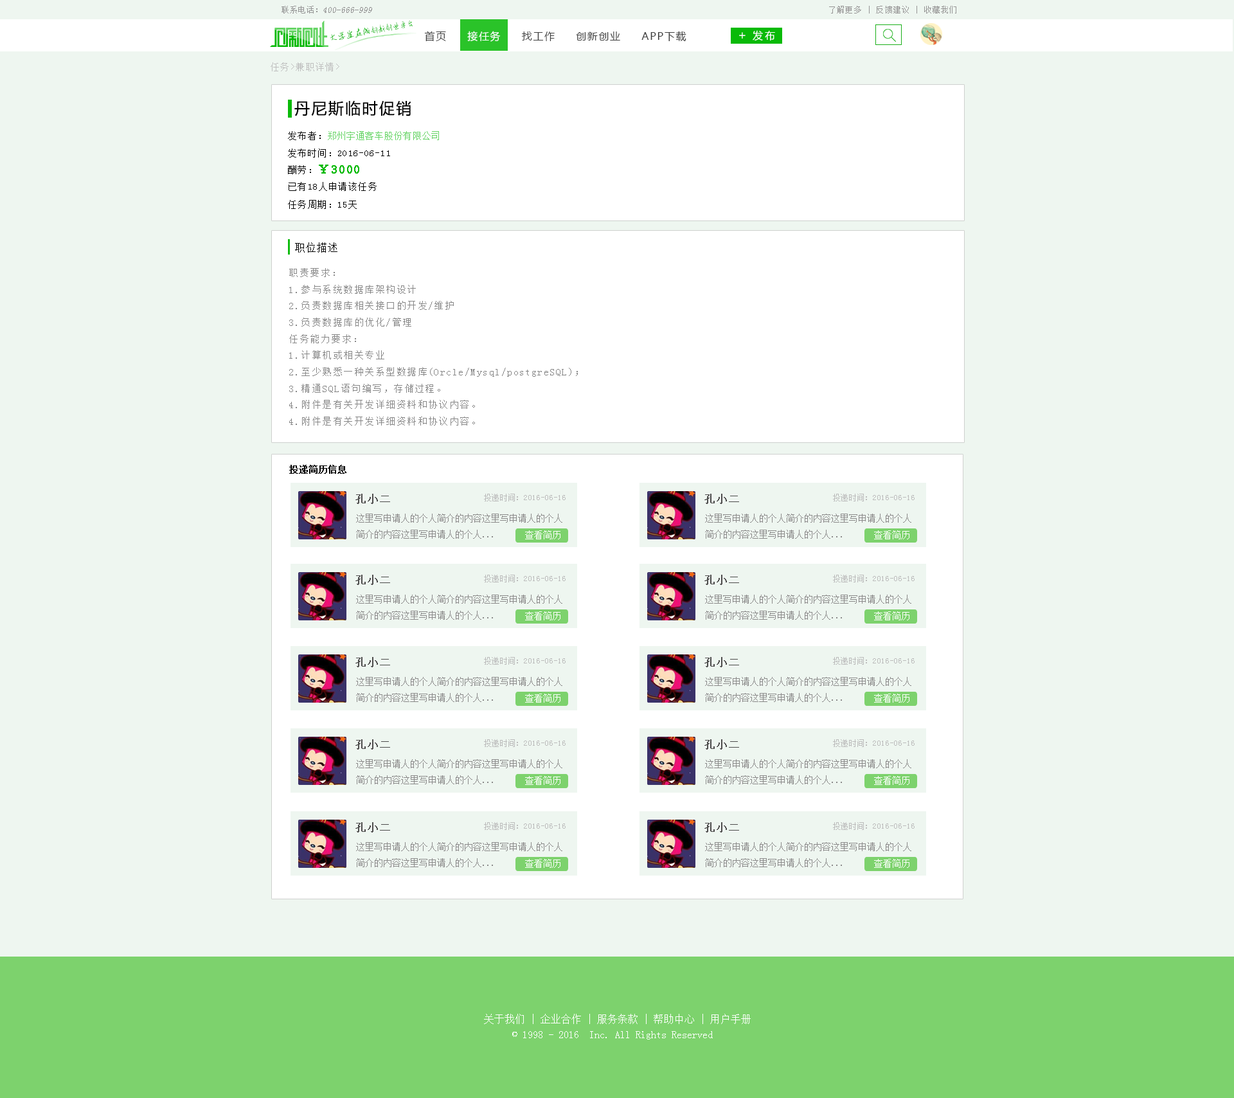
<style>
.page{position:relative;width:1234px;height:1098px;background:#eef6f0}
.page>*{position:absolute;margin:0}
.t1{font:8.6px "SimSun";color:#959595;font-style:italic}
.t2{font:8.6px "SimSun";color:#959595}
.t3{font:7.7px "SimSun";letter-spacing:0.1em;color:#959494}
.t4{font:8px "AnJingCheng-Xing-2.0";letter-spacing:-0.01em;color:#09ba08}
.t5{font:9px "AnJingCheng-Xing-2.0";letter-spacing:-0.01em;color:#09ba08}
.t6{font:10.3px "MicrosoftYaHei";letter-spacing:0.1em;color:#3e3e3e}
.t7{font:10.3px "MicrosoftYaHei";letter-spacing:0.1em;color:#ffffff}
.t8{font:12px "MicrosoftYaHei";letter-spacing:0.2em;color:#ffffff}
.t9{font:10.3px "MicrosoftYaHei";letter-spacing:0.2em;color:#ffffff}
.t10{font:9px "SimSun";letter-spacing:0.1em;color:#bebebe}
.t11{font:15.4px "MicrosoftYaHei";letter-spacing:0.1em;color:#000000}
.t12{font:9px "SimSun";letter-spacing:0.05em;color:#62d361}
.t13{font:9px "SimSun";letter-spacing:0.1em;color:#000000}
.t14{font:11.6px "SimSun";letter-spacing:0.1em;color:#09ba08;font-weight:bold}
.t15{font:11.1px "SimSun";color:#000000}
.t16{font:9.4px "SimSun";letter-spacing:0.1em;color:#868686}
.t17{font:9px "SimSun";color:#040404;font-weight:bold}
.t18{font:10.3px "SimSun";letter-spacing:0.1em;color:#4d4c4c;font-weight:bold}
.t19{font:7.7px "SimSun";color:#bbbbbb}
.t20{font:9px "SimSun";color:#8a8989}
.t21{font:9px "SimSun";color:#ffffff}
.t22{font:10.3px/15.4px "SimSun";color:#ffffff}
</style>
<div class="page">
<p class="t1" style="left:282px;top:6px;width:90px;height:8px"><span class="t2">联系电话：</span>400-666-999</p>
<p class="t3" style="left:829px;top:6px;width:128px;height:8px">了解更多 | 反馈建议 | 收藏我们</p>
<p class="t4" style="left:330px;top:20px;width:83px;height:21px;rotate:-10deg"><span class="t5">大学生在线</span>创新创业平台</p>
<p class="t6" style="left:424px;top:31px;width:263px;height:11px">首页     <span class="t7">接任务</span>     找工作     创新创业     APP下载</p>
<p class="t8" style="left:739px;top:32px;width:7px;height:7px">+</p>
<p class="t9" style="left:753px;top:30px;width:22px;height:11px">发布</p>
<p class="t10" style="left:271px;top:62px;width:68px;height:9px">任务&gt;兼职详情&gt;</p>
<p class="t11" style="left:294px;top:100px;width:117px;height:16px">丹尼斯临时促销</p>
<p class="t12" style="left:288px;top:131px;width:151px;height:9px"><span class="t13">发布者：</span>郑州宇通客车股份有限公司</p>
<p class="t13" style="left:288px;top:149px;width:102px;height:9px">发布时间：2016-06-11</p>
<p class="t14" style="left:288px;top:165px;width:71px;height:9px"><span class="t13">酬劳：</span>￥3000</p>
<p class="t13" style="left:289px;top:182px;width:88px;height:9px">已有18人申请该任务</p>
<p class="t13" style="left:288px;top:200px;width:69px;height:9px">任务周期：15天</p>
<p class="t15" style="left:295px;top:242px;width:43px;height:11px">职位描述</p>
<p class="t16" style="left:289px;top:268px;width:289px;height:158px">职责要求：<br>1.参与系统数据库架构设计<br>2.负责数据库相关接口的开发/维护<br>3.负责数据库的优化/管理<br>任务能力要求：<br>1.计算机或相关专业<br>2.至少熟悉一种关系型数据库(Orcle/Mysql/postgreSQL)；<br>3.精通SQL语句编写，存储过程。<br>4.附件是有关开发详细资料和协议内容。<br>4.附件是有关开发详细资料和协议内容。<br>4.附件是有关开发详细资料和协议内容。</p>
<p class="t17" style="left:289px;top:465px;width:58px;height:9px">投递简历信息</p>
<p class="t18" style="left:356px;top:494px;width:34px;height:10px">孔小二</p>
<p class="t19" style="left:484px;top:494px;width:82px;height:7px">投递时间：2016-06-16</p>
<p class="t18" style="left:705px;top:494px;width:34px;height:10px">孔小二</p>
<p class="t19" style="left:833px;top:494px;width:82px;height:7px">投递时间：2016-06-16</p>
<p class="t20" style="left:356px;top:514px;width:207px;height:25px">这里写申请人的个人简介的内容这里写申请人的个人<br>简介的内容这里写申请人的个人...</p>
<p class="t20" style="left:705px;top:514px;width:207px;height:25px">这里写申请人的个人简介的内容这里写申请人的个人<br>简介的内容这里写申请人的个人...</p>
<p class="t21" style="left:525px;top:530px;width:36px;height:9px">查看简历</p>
<p class="t21" style="left:874px;top:530px;width:36px;height:9px">查看简历</p>
<p class="t18" style="left:356px;top:575px;width:34px;height:10px">孔小二</p>
<p class="t19" style="left:484px;top:575px;width:82px;height:7px">投递时间：2016-06-16</p>
<p class="t18" style="left:705px;top:575px;width:34px;height:10px">孔小二</p>
<p class="t19" style="left:833px;top:575px;width:82px;height:7px">投递时间：2016-06-16</p>
<p class="t20" style="left:356px;top:595px;width:207px;height:25px">这里写申请人的个人简介的内容这里写申请人的个人<br>简介的内容这里写申请人的个人...</p>
<p class="t20" style="left:705px;top:595px;width:207px;height:25px">这里写申请人的个人简介的内容这里写申请人的个人<br>简介的内容这里写申请人的个人...</p>
<p class="t21" style="left:525px;top:611px;width:36px;height:9px">查看简历</p>
<p class="t21" style="left:874px;top:611px;width:36px;height:9px">查看简历</p>
<p class="t18" style="left:356px;top:657px;width:34px;height:10px">孔小二</p>
<p class="t19" style="left:484px;top:657px;width:82px;height:8px">投递时间：2016-06-16</p>
<p class="t18" style="left:705px;top:657px;width:34px;height:10px">孔小二</p>
<p class="t19" style="left:833px;top:657px;width:82px;height:8px">投递时间：2016-06-16</p>
<p class="t20" style="left:356px;top:677px;width:207px;height:25px">这里写申请人的个人简介的内容这里写申请人的个人<br>简介的内容这里写申请人的个人...</p>
<p class="t20" style="left:705px;top:677px;width:207px;height:25px">这里写申请人的个人简介的内容这里写申请人的个人<br>简介的内容这里写申请人的个人...</p>
<p class="t21" style="left:525px;top:694px;width:36px;height:9px">查看简历</p>
<p class="t21" style="left:874px;top:694px;width:36px;height:9px">查看简历</p>
<p class="t18" style="left:356px;top:739px;width:34px;height:11px">孔小二</p>
<p class="t19" style="left:484px;top:739px;width:82px;height:8px">投递时间：2016-06-16</p>
<p class="t18" style="left:705px;top:739px;width:34px;height:11px">孔小二</p>
<p class="t19" style="left:833px;top:739px;width:82px;height:8px">投递时间：2016-06-16</p>
<p class="t20" style="left:356px;top:759px;width:207px;height:25px">这里写申请人的个人简介的内容这里写申请人的个人<br>简介的内容这里写申请人的个人...</p>
<p class="t20" style="left:705px;top:759px;width:207px;height:25px">这里写申请人的个人简介的内容这里写申请人的个人<br>简介的内容这里写申请人的个人...</p>
<p class="t21" style="left:525px;top:776px;width:36px;height:9px">查看简历</p>
<p class="t21" style="left:874px;top:776px;width:36px;height:9px">查看简历</p>
<p class="t18" style="left:356px;top:822px;width:34px;height:11px">孔小二</p>
<p class="t19" style="left:484px;top:822px;width:82px;height:8px">投递时间：2016-06-16</p>
<p class="t18" style="left:705px;top:822px;width:34px;height:11px">孔小二</p>
<p class="t19" style="left:833px;top:822px;width:82px;height:8px">投递时间：2016-06-16</p>
<p class="t20" style="left:356px;top:842px;width:207px;height:25px">这里写申请人的个人简介的内容这里写申请人的个人<br>简介的内容这里写申请人的个人...</p>
<p class="t20" style="left:705px;top:842px;width:207px;height:25px">这里写申请人的个人简介的内容这里写申请人的个人<br>简介的内容这里写申请人的个人...</p>
<p class="t21" style="left:525px;top:859px;width:36px;height:9px">查看简历</p>
<p class="t21" style="left:874px;top:859px;width:36px;height:9px">查看简历</p>
<p class="t22" style="left:484px;top:1014px;width:267px;height:26px;text-align:center">关于我们 | 企业合作 | 服务条款 | 帮助中心 | 用户手册<br>© 1998 - 2016  Inc. All Rights Reserved</p>
</div>
